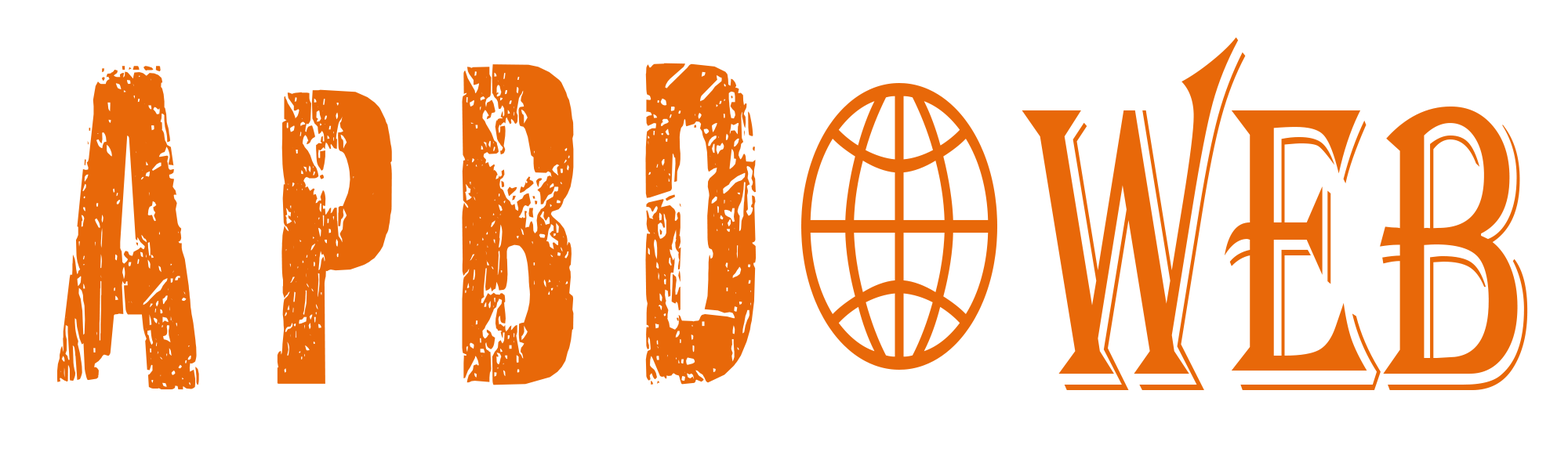
<style>
.page{position:relative;width:1568px;height:470px;background:#ffffff}
.page>*{position:absolute;margin:0}
.t1{font:419.4px "Algerian";color:#e86809;scale:0.59 1}
.t2{font:419.4px "28DaysLater";color:#e86809;scale:0.59 1}
</style>
<div class="page">
<p class="t1" style="left:1022px;top:37px;width:506px;height:353px">Web</p>
<p class="t2" style="left:57px;top:63px;width:700px;height:327px">A P B D</p>
</div>
